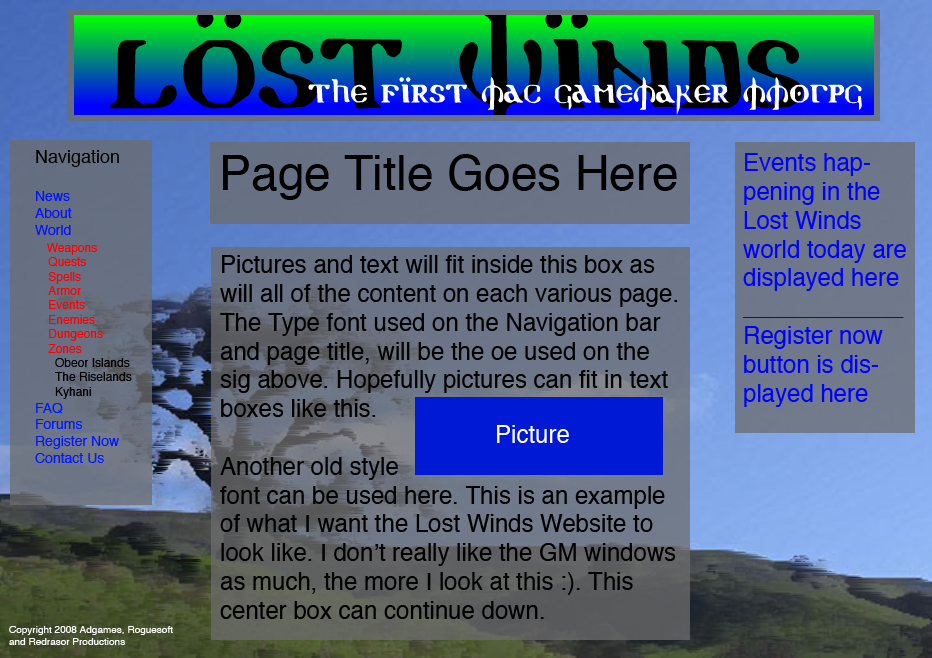
<style>
.page{position:relative;width:932px;height:658px}
.page>*{position:absolute;margin:0}
.t1{font:12px "Helvetica";color:#ff0000}
.t2{font:18px "Helvetica";color:#000000}
.t3{font:14px "Helvetica";color:#0012ff}
.t4{font:12px "Helvetica";color:#000000}
.t5{font:14px "Helvetica";color:#0018ff}
.t6{font:48px "Helvetica";color:#000000}
.t7{font:24px "Helvetica";color:#0000ff}
.t8{font:24px "Helvetica";color:#000000}
.t9{font:24px "Helvetica";color:#ffffff}
.t10{font:10px "Helvetica";color:#ffffff}
</style>
<div class="page">
<p class="t1" style="left:35px;top:150px;width:97px;height:313px"><span class="t2">Navigation<br><br></span><span class="t3">News<br>About<br>World<br>   </span>Weapons<br>    Quests<br>    Spells<br>    Armor<br>    Events<br>    Enemies<br>    Dungeons<br>    Zones<br><span class="t4">      Obeor Islands<br>      The Riselands<br>      Kyhani<br></span><span class="t5">FAQ<br>Forums<br>Register Now<br>Contact Us</span></p>
<p class="t6" style="left:223px;top:154px;width:454px;height:46px">Page Title Goes Here</p>
<p class="t7" style="left:742px;top:153px;width:164px;height:254px">Events happening in the Lost Winds world today are displayed here<br>____________<br>Register now button is displayed here</p>
<p class="t8" style="left:220px;top:255px;width:458px;height:364px">Pictures and text will fit inside this box as will all of the content on each various page. The Type font used on the Navigation bar and page title, will be the oe used on the sig above. Hopefully pictures can fit in text boxes like this.<br><br>Another old style <br>font can be used here. This is an example of what I want the Lost Winds Website to look like. I don’t really like the GM windows as much, the more I look at this :). This center box can continue down.</p>
<p class="t9" style="left:497px;top:425px;width:72px;height:18px">Picture</p>
<p class="t10" style="left:9px;top:626px;width:164px;height:19px">Copyright 2008 Adgames, Roguesoft and Redrasor Productions</p>
</div>
